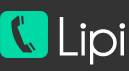
<style>
.page{position:relative;width:129px;height:71px;background:#333333}
.page>*{position:absolute;margin:0}
.t1{font:48px "CaviarDreams";letter-spacing:-0.05em;color:#ffffff;font-weight:bold}
</style>
<div class="page">
<p class="t1" style="left:59px;top:17px;width:66px;height:48px">Lipi</p>
</div>
